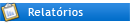
<style>
.page{position:relative;width:130px;height:24px;background:#ffffff}
.page>*{position:absolute;margin:0}
.t1{font:11px "TrebuchetMS";letter-spacing:0.06em;color:#ffffff}
</style>
<div class="page">
<p class="t1" style="left:28px;top:7px;width:55px;height:9px">Relatórios</p>
</div>
